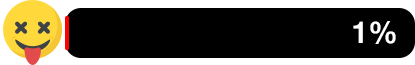
<style>
.page{position:relative;width:415px;height:65px;background:#000000}
.page>*{position:absolute;margin:0}
.t1{font:30px "HelveticaNeueCyr-Medium";color:#ffffff}
</style>
<div class="page">
<p class="t1" style="left:353px;top:21px;width:43px;height:23px">1%</p>
</div>
